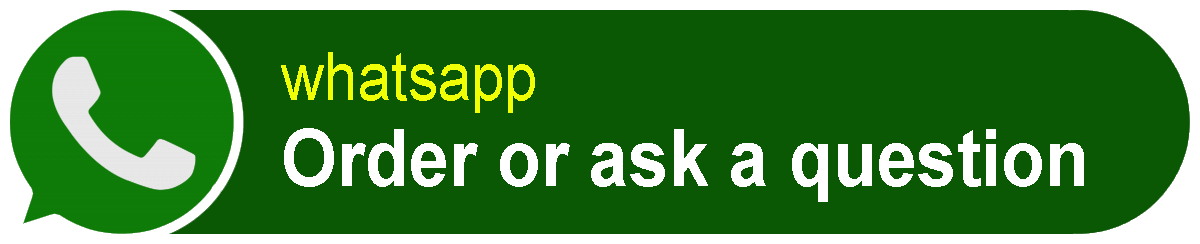
<style>
.page{position:relative;width:1200px;height:244px;background:#0a5704}
.page>*{position:absolute;margin:0}
.t1{font:79.2px "Arial-BoldMT";color:#ffffff;scale:0.91 1}
.t2{font:66px "ArialMT";color:#f0ff05;scale:0.91 1}
</style>
<div class="page">
<p class="t1" style="left:281px;top:52px;width:803px;height:150px"><span class="t2">whatsapp<br></span>Order or ask a question</p>
</div>
